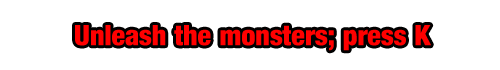
<style>
.page{position:relative;width:500px;height:70px;background:#ffffff}
.page>*{position:absolute;margin:0}
.t1{font:28px "Harvest";color:#ff0000}
</style>
<div class="page">
<p class="t1" style="left:75px;top:25px;width:356px;height:26px">Unleash the monsters; press K</p>
</div>
